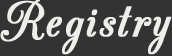
<style>
.page{position:relative;width:172px;height:56px;background:#333333}
.page>*{position:absolute;margin:0}
.t1{font:60px "CACChampagne";letter-spacing:0.025em;color:#eeeeeb;font-weight:bold}
</style>
<div class="page">
<p class="t1" style="left:0px;top:0px;width:172px;height:55px">Registry</p>
</div>
